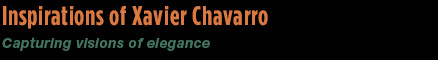
<style>
.page{position:relative;width:438px;height:60px;background:#000000}
.page>*{position:absolute;margin:0}
.t1{font:27px "GothamCondensed-Bold";letter-spacing:0.025em;color:#da7942}
.t2{font:14px "HelveticaNeueCE-BoldItalic";letter-spacing:0.025em;color:#44745e}
</style>
<div class="page">
<p class="t1" style="left:3px;top:6px;width:265px;height:23px">Inspirations of Xavier Chavarro</p>
<p class="t2" style="left:2px;top:37px;width:208px;height:14px">Capturing visions of elegance</p>
</div>
